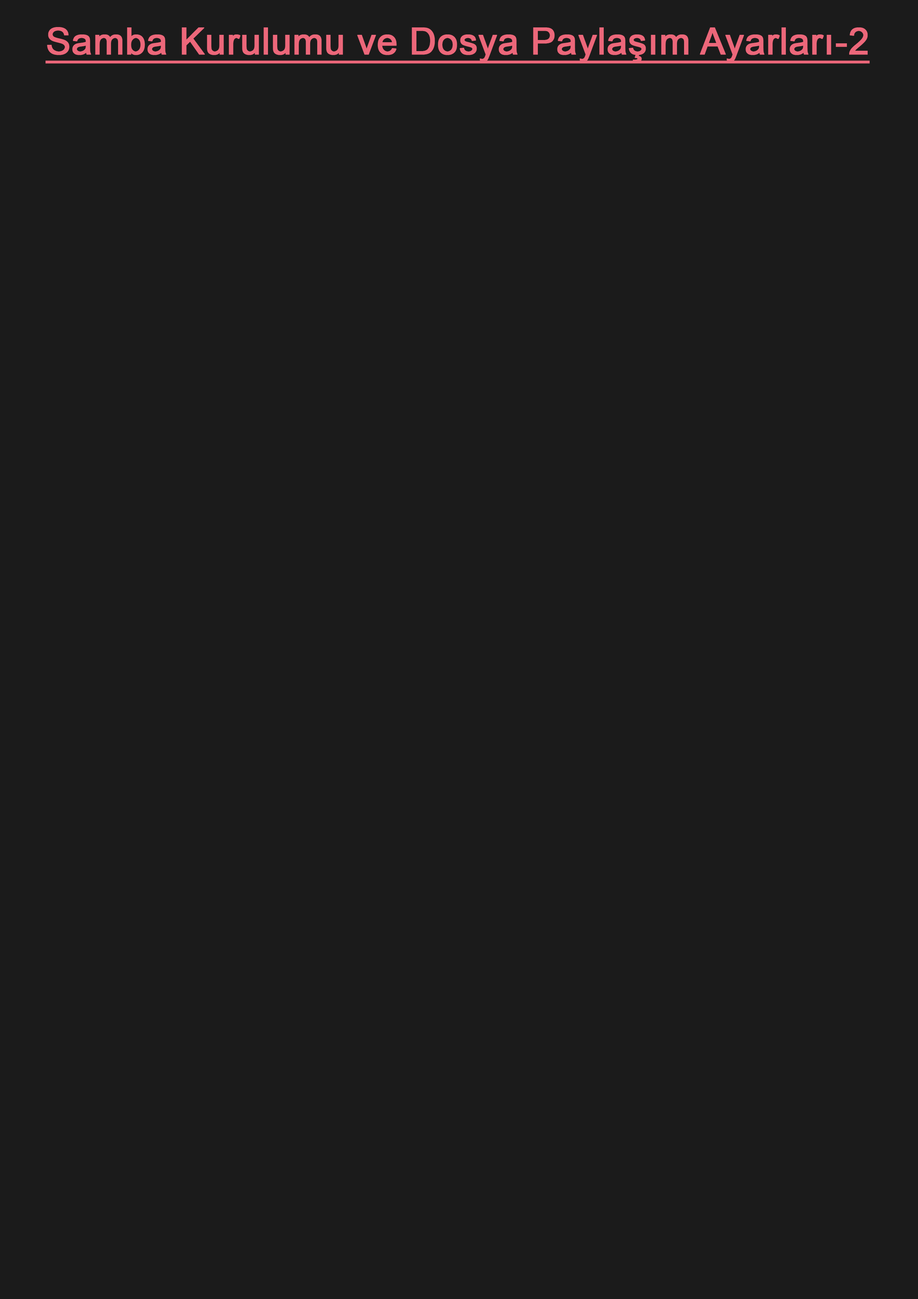
<style>
.page{position:relative;width:918px;height:1299px;background:#1b1b1b}
.page>*{position:absolute;margin:0}
.t1{font:37px "ArialMT";color:#ec677a;font-weight:bold;text-decoration:underline}
</style>
<div class="page">
<p class="t1" style="left:46px;top:27px;width:824px;height:37px">Samba Kurulumu ve Dosya Paylaşım Ayarları-2</p>
</div>
